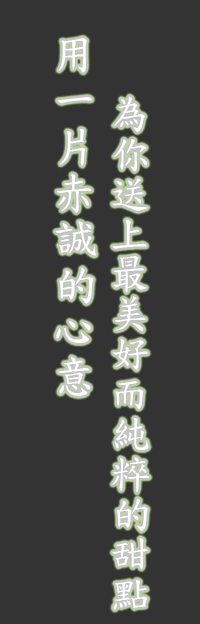
<style>
.page{position:relative;width:200px;height:624px;background:#333333}
.page>*{position:absolute;margin:0}
.t1{font:44px/46px "DFKaiShu-SB-Estd-BF";color:#ffffff}
.t2{font:40px/40px "DFKaiShu-SB-Estd-BF";color:#ffffff}
</style>
<div class="page">
<p class="t1" style="left:55px;top:38px;width:41px;height:358px;text-align:center">用<br>一<br>片<br>赤<br>誠<br>的<br>心<br>意</p>
<p class="t2" style="left:112px;top:96px;width:38px;height:514px;text-align:center">為<br>你<br>送<br>上<br>最<br>美<br>好<br>而<br>純<br>粹<br>的<br>甜<br>點</p>
</div>
